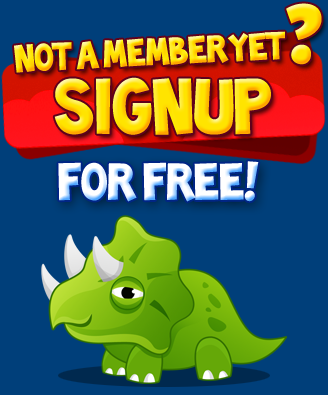
<style>
.page{position:relative;width:328px;height:395px;background:#003f7a}
.page>*{position:absolute;margin:0}
.t1{font:35.3px "Toonish";text-transform:uppercase}
.t2{font:72px "Toonish";text-transform:uppercase}
.t3{font:48px "Toonish";color:#ffffff;text-transform:uppercase}
</style>
<div class="page">
<p class="t1" style="left:14px;top:31px;width:271px;height:42px;rotate:-3deg">Not a MEMBER YET</p>
<p class="t2" style="left:54px;top:77px;width:217px;height:58px">SIGNUP</p>
<p class="t3" style="left:58px;top:161px;width:201px;height:41px">FOR FREE!</p>
</div>
